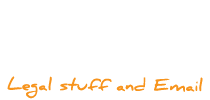
<style>
.page{position:relative;width:210px;height:100px;background:#ffffff}
.page>*{position:absolute;margin:0}
.t1{font:16px "DanielBold";color:#f7941d}
</style>
<div class="page">
<p class="t1" style="left:7px;top:76px;width:196px;height:23px">Legal stuff and Email</p>
</div>
